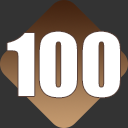
<style>
.page{position:relative;width:128px;height:128px;background:#333333}
.page>*{position:absolute;margin:0}
.t1{font:79.8px "Impact";color:#ffffff}
</style>
<div class="page">
<p class="t1" style="left:7px;top:31px;width:113px;height:67px">100</p>
</div>
